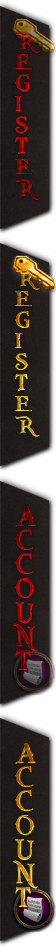
<style>
.page{position:relative;width:56px;height:948px}
.page>*{position:absolute;margin:0}
.t1{font:24px/21px "PiecesofEight"}
.t2{font:30px/24px "PiecesofEight"}
</style>
<div class="page">
<p class="t1" style="left:15px;top:32px;width:25px;height:168px">R<br>E<br>G<br>I<br>S<br>T<br>E<br>R</p>
<p class="t1" style="left:15px;top:269px;width:25px;height:168px">R<br>E<br>G<br>I<br>S<br>T<br>E<br>R</p>
<p class="t2" style="left:12px;top:506px;width:26px;height:164px">A<br>C<br>C<br>O<br>U<br>N<br>T</p>
<p class="t2" style="left:12px;top:743px;width:26px;height:164px">A<br>C<br>C<br>O<br>U<br>N<br>T</p>
</div>
